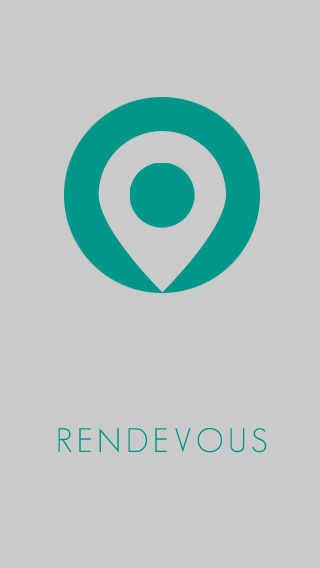
<style>
.page{position:relative;width:320px;height:568px;background:#c9caca}
.page>*{position:absolute;margin:0}
.t1{font:33.3px "GeosansLight";letter-spacing:0.14em;color:#009688}
</style>
<div class="page">
<p class="t1" style="left:58px;top:428px;width:209px;height:25px">RENDEVOUS</p>
<p class="t1" style="left:58px;top:428px;width:209px;height:25px">RENDEVOUS</p>
</div>
